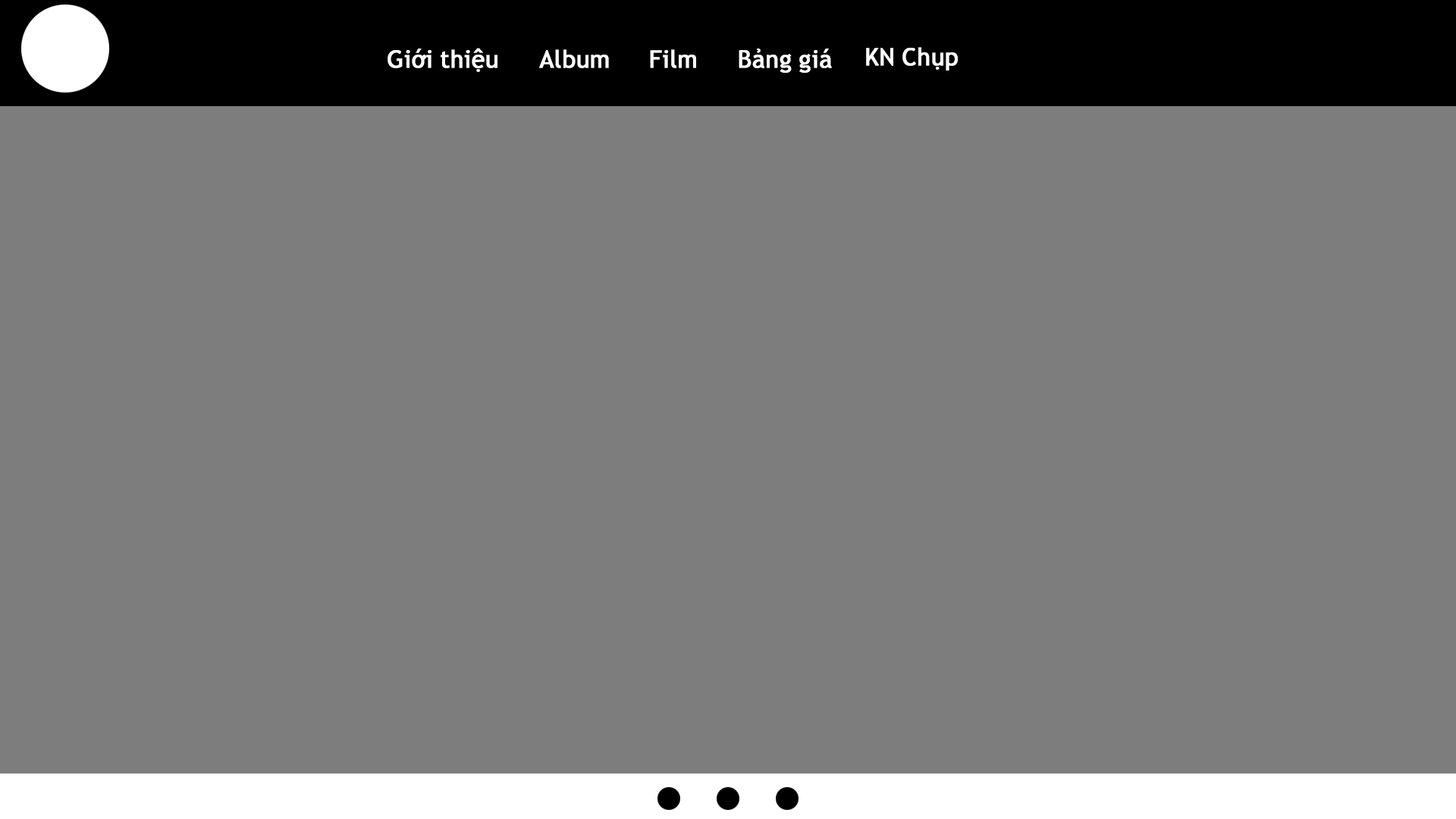
<style>
.page{position:relative;width:1456px;height:819px;background:#7d7d7d}
.page>*{position:absolute;margin:0}
.t1{font:24.1px "SVN-Trebuchets";color:#ffffff;font-weight:bold}
</style>
<div class="page">
<p class="t1" style="left:388px;top:48px;width:109px;height:24px">Giới thiệu</p>
<p class="t1" style="left:539px;top:49px;width:70px;height:19px">Album</p>
<p class="t1" style="left:650px;top:49px;width:46px;height:19px">Film</p>
<p class="t1" style="left:739px;top:49px;width:93px;height:24px">Bảng giá</p>
<p class="t1" style="left:866px;top:47px;width:92px;height:24px">KN Chụp</p>
</div>
